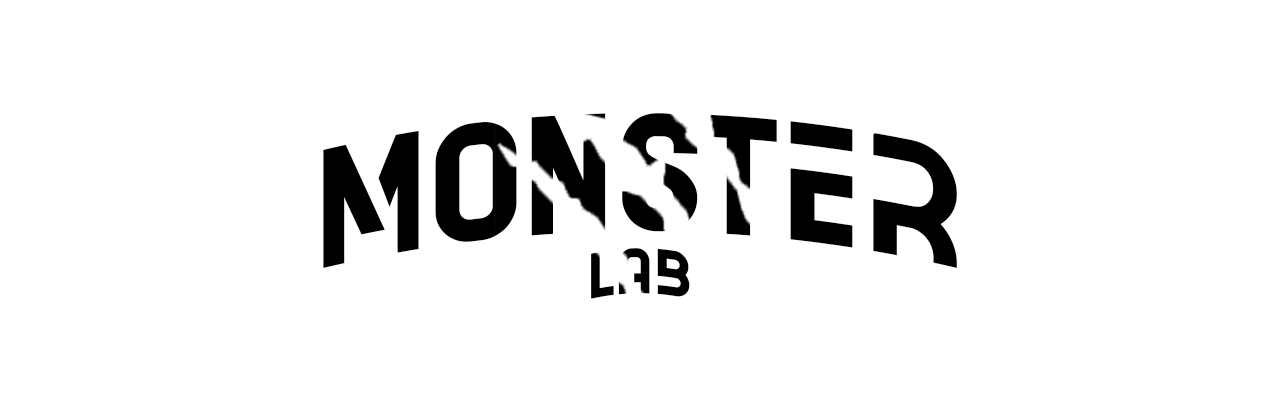
<style>
.page{position:relative;width:1280px;height:420px;background:#ffffff}
.page>*{position:absolute;margin:0}
.t1{font:200px "ACETONE";color:#000000}
.t2{font:75px "ACETONE";color:#000000}
</style>
<div class="page">
<p class="t1" style="left:323px;top:113px;width:634px;height:155px">MONSTER</p>
<p class="t2" style="left:591px;top:248px;width:99px;height:51px">LAB</p>
</div>
